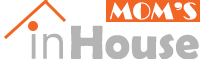
<style>
.page{position:relative;width:200px;height:59px;background:#ffffff}
.page>*{position:absolute;margin:0}
.t1{font:24px "Broadway";color:#ffffff}
.t2{font:48px "Bahnschrift-Light";color:#b3b3b3}
.t3{font:48px "BerlinSansFBDemi-Bold";color:#b4b4b4}
</style>
<div class="page">
<p class="t1" style="left:110px;top:2px;width:87px;height:18px">MOM’S</p>
<p class="t2" style="left:31px;top:24px;width:32px;height:35px">in</p>
<p class="t3" style="left:71px;top:25px;width:128px;height:35px">House</p>
</div>
